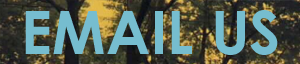
<style>
.page{position:relative;width:300px;height:64px;background:#76bdcf}
.page>*{position:absolute;margin:0}
.t1{font:60px "CenturyGothic-Bold";color:#76bdcf}
</style>
<div class="page">
<p class="t1" style="left:25px;top:10px;width:253px;height:45px">EMAIL US</p>
</div>
